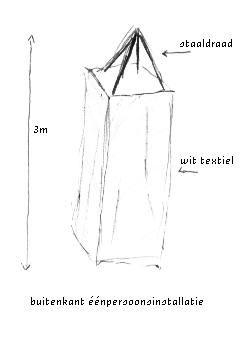
<style>
.page{position:relative;width:241px;height:337px;background:#ffffff}
.page>*{position:absolute;margin:0}
.t1{font:8px "Unibody8-Italic";color:#000000}
</style>
<div class="page">
<p class="t1" style="left:180px;top:39px;width:52px;height:8px">staaldraad</p>
<p class="t1" style="left:34px;top:126px;width:13px;height:7px">3m</p>
<p class="t1" style="left:181px;top:156px;width:52px;height:8px">wit textiel</p>
<p class="t1" style="left:31px;top:296px;width:172px;height:11px">buitenkant éénpersoonsinstallatie</p>
</div>
